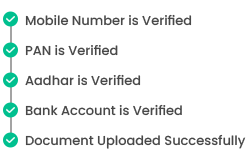
<style>
.page{position:relative;width:250px;height:156px;background:#ffffff}
.page>*{position:absolute;margin:0}
.t1{font:13px/30px "Poppins-Medium";color:#484848}
</style>
<div class="page">
<p class="t1" style="left:25px;top:14px;width:221px;height:135px">Mobile Number is Verified<br>PAN is Verified<br>Aadhar is Verified<br>Bank Account is Verified<br>Document Uploaded Successfully</p>
</div>
